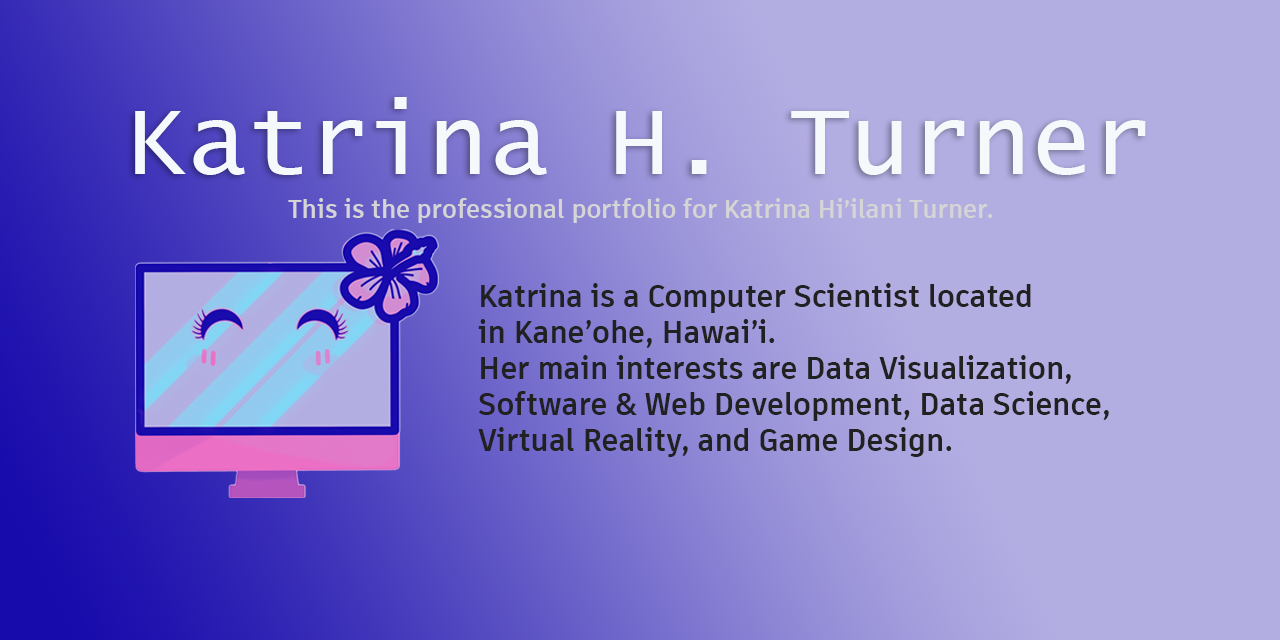
<style>
.page{position:relative;width:1280px;height:640px;background:#b3aee2}
.page>*{position:absolute;margin:0}
.t1{font:100px "LucidaConsole";color:#f5f9fb}
.t2{font:25px "ArtifaktElement-Bold";color:#d6d5d5}
.t3{font:30px "ArtifaktElement-Bold";color:#212121}
</style>
<div class="page">
<p class="t1" style="left:135px;top:97px;width:1011px;height:78px">Katrina H. Turner</p>
<p class="t2" style="left:288px;top:198px;width:704px;height:25px">This is the professional portfolio for Katrina Hi’ilani Turner.</p>
<p class="t3" style="left:478px;top:283px;width:631px;height:174px">Katrina is a Computer Scientist located <br>in Kane’ohe, Hawai’i.<br>Her main interests are Data Visualization, <br>Software &amp; Web Development, Data Science, <br>Virtual Reality, and Game Design.</p>
</div>
